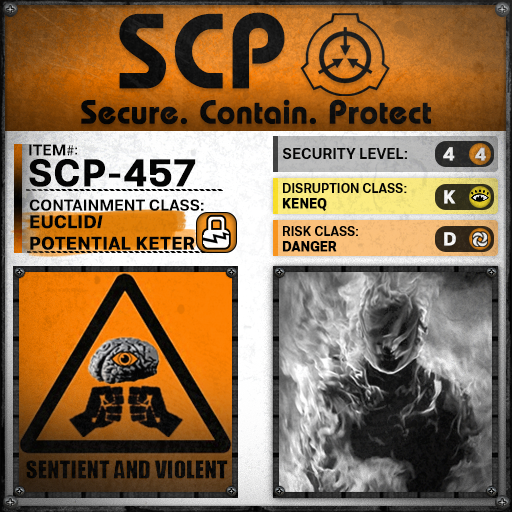
<style>
.page{position:relative;width:512px;height:512px}
.page>*{position:absolute;margin:0}
.t1{font:105.8px "BauhausLT-Demi";color:#000000;font-weight:bold}
.t2{font:33px "BauhausLT-Demi";color:#000000;font-weight:bold}
.t3{font:15.7px "Molde-Semibold";color:#000000}
.t4{font:15.7px "MyriadPro-Regular";color:#000000}
.t5{font:13.7px "Molde-Semibold";color:#000000}
.t6{font:15px "Molde-Semibold";color:#000000}
.t7{font:18.6px "Molde-Semibold";color:#ffffff;font-weight:bold}
.t8{font:17.8px "Molde-Semibold";color:#d5d6d6;font-weight:bold}
.t9{font:38.2px "Molde-Semibold";color:#000000;font-weight:bold}
.t10{font:12.8px "Molde-Semibold";color:#000000}
.t11{font:12.8px "Molde-Semibold";color:#000000;font-weight:bold}
.t12{font:15.9px "Molde-Semibold";color:#000000}
.t13{font:17.9px "Molde-Semibold";color:#000000;font-weight:bold}
</style>
<div class="page">
<p class="t1" style="left:119px;top:12px;width:166px;height:77px">SCP</p>
<p class="t2" style="left:81px;top:99px;width:350px;height:26px">Secure. Contain. Protect</p>
<p class="t3" style="left:29px;top:144px;width:45px;height:12px">ITEM<span class="t4">#</span></p>
<p class="t5" style="left:75px;top:147px;width:2px;height:8px">:</p>
<p class="t6" style="left:283px;top:148px;width:124px;height:11px">SECURITY LEVEL:</p>
<p class="t7" style="left:443px;top:147px;width:12px;height:14px">4</p>
<p class="t8" style="left:475px;top:147px;width:11px;height:14px">4</p>
<p class="t9" style="left:29px;top:159px;width:167px;height:28px">SCP-457</p>
<p class="t10" style="left:282px;top:183px;width:125px;height:28px">DISRUPTION CLASS:<br><span class="t11">KENEQ</span></p>
<p class="t7" style="left:444px;top:190px;width:12px;height:14px">K</p>
<p class="t12" style="left:29px;top:199px;width:175px;height:12px">CONTAINMENT CLASS:</p>
<p class="t13" style="left:30px;top:215px;width:165px;height:35px">EUCLID/<br>POTENTIAL KETER</p>
<p class="t10" style="left:282px;top:226px;width:76px;height:26px">RISK CLASS:<br><span class="t11">DANGER</span></p>
<p class="t7" style="left:444px;top:232px;width:12px;height:14px">D</p>
</div>
